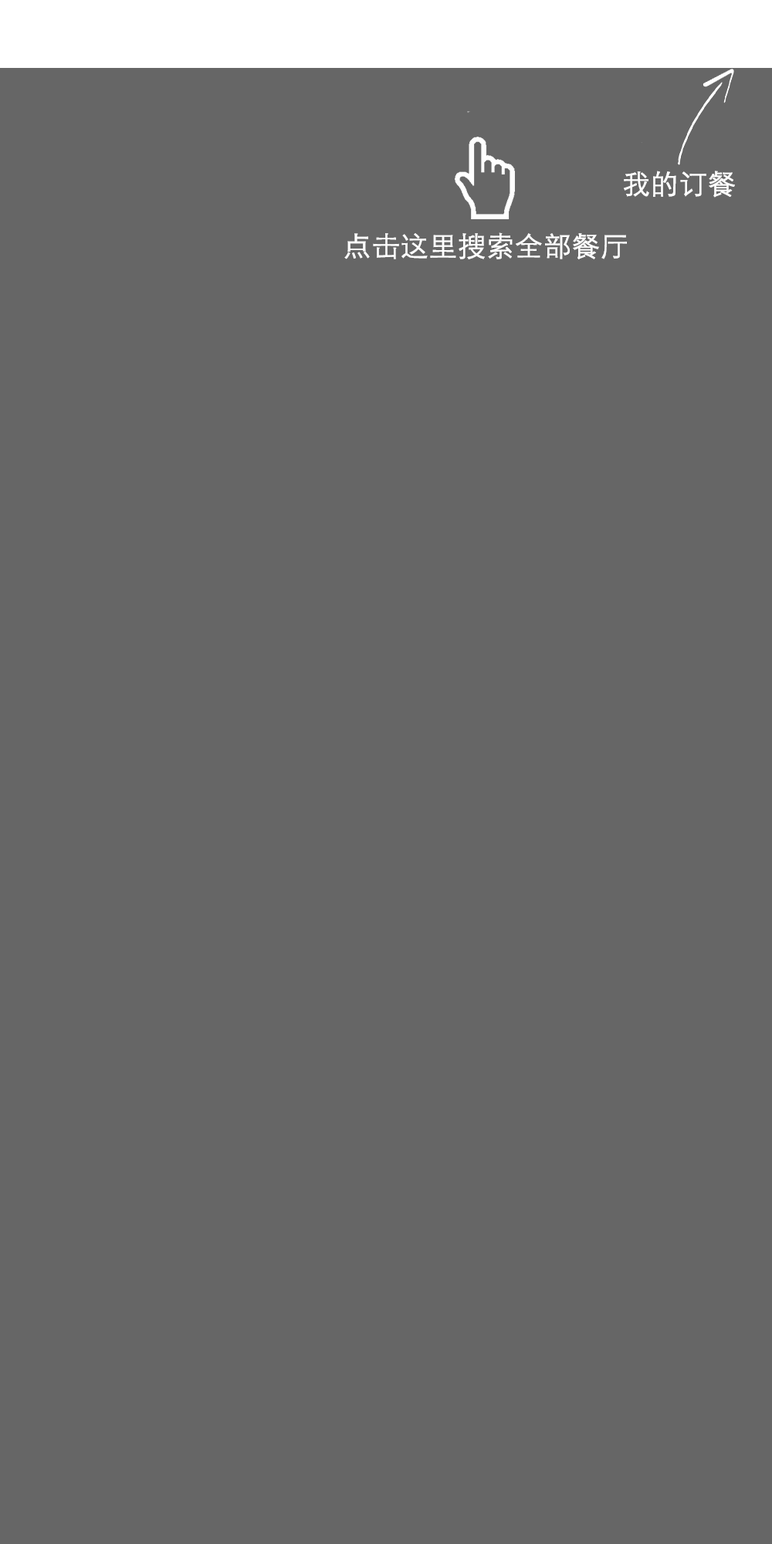
<style>
.page{position:relative;width:772px;height:1544px;background:#666666}
.page>*{position:absolute;margin:0}
.t1{font:27.8px "STXihei";color:#ffffff;font-weight:bold}
</style>
<div class="page">
<p class="t1" style="left:624px;top:171px;width:111px;height:27px">我的订餐</p>
<p class="t1" style="left:344px;top:232px;width:283px;height:27px">点击这里搜索全部餐厅</p>
</div>
